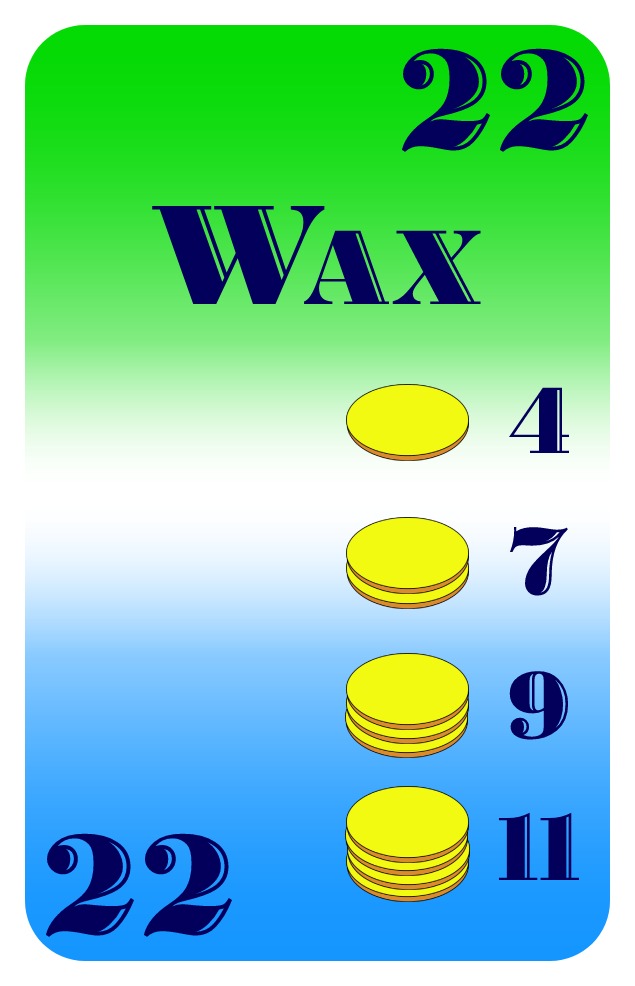
<style>
.page{position:relative;width:635px;height:986px}
.page>*{position:absolute;margin:0}
.t1{font:150px "BodoniHighlightICG";color:#02005b}
.t2{font:112px "BodoniHighlightICG";color:#02005b}
.t3{font:100px "BodoniHighlightICG";color:#02005b}
</style>
<div class="page">
<p class="t1" style="left:401px;top:48px;width:188px;height:104px">22</p>
<p class="t2" style="left:152px;top:206px;width:329px;height:98px"><span class="t1">W</span>AX</p>
<p class="t3" style="left:508px;top:387px;width:61px;height:66px">4</p>
<p class="t3" style="left:510px;top:527px;width:58px;height:69px">7</p>
<p class="t3" style="left:509px;top:671px;width:60px;height:69px">9</p>
<p class="t3" style="left:498px;top:812px;width:81px;height:68px">11</p>
<p class="t1" style="left:45px;top:833px;width:188px;height:104px">22</p>
</div>
